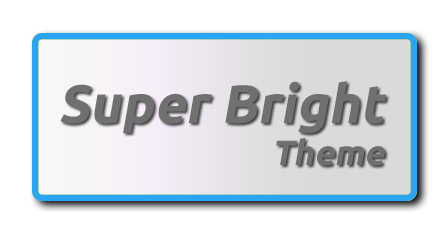
<style>
.page{position:relative;width:446px;height:235px;background:#ffffff}
.page>*{position:absolute;margin:0}
.t1{font:54px "Ubuntu-Bold";color:#707070;font-style:italic}
.t2{font:35px "Ubuntu-Bold";color:#707070;font-style:italic}
</style>
<div class="page">
<p class="t1" style="left:60px;top:81px;width:327px;height:53px">Super Bright</p>
<p class="t2" style="left:276px;top:137px;width:109px;height:29px">Theme</p>
</div>
